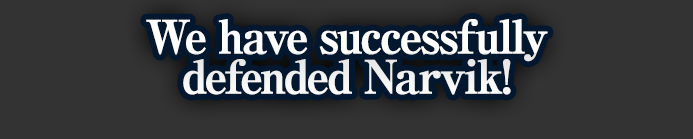
<style>
.page{position:relative;width:693px;height:139px;background:#333333}
.page>*{position:absolute;margin:0}
.t1{font:46px/40px "RyuminPro-ExBold";letter-spacing:-0.08em;color:#ffffff;font-weight:bold}
</style>
<div class="page">
<p class="t1" style="left:146px;top:19px;width:402px;height:76px;text-align:center">We have successfully<br>defended Narvik!</p>
</div>
